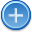
<style>
.page{position:relative;width:32px;height:32px}
.page>*{position:absolute;margin:0}
.t1{font:30px "ArialMT";color:#d6ebf9}
</style>
<div class="page">
<p class="t1" style="left:8px;top:8px;width:15px;height:15px">+</p>
</div>
